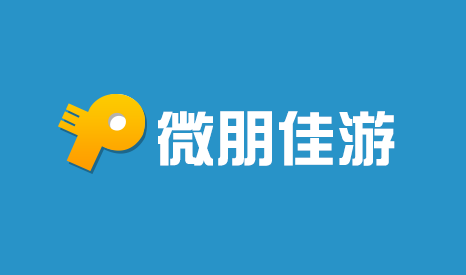
<style>
.page{position:relative;width:466px;height:275px;background:#2893c8}
.page>*{position:absolute;margin:0}
.t1{font:60px "DFZongYi-Bd-80-Win-GB";letter-spacing:0.005em;color:#ffffff}
</style>
<div class="page">
<p class="t1" style="left:158px;top:111px;width:237px;height:55px">微朋佳游</p>
</div>
